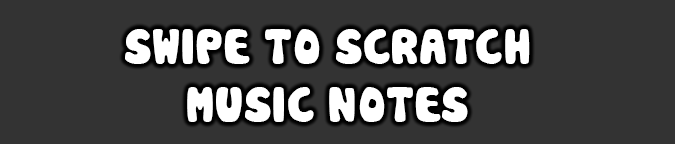
<style>
.page{position:relative;width:675px;height:144px;background:#333333}
.page>*{position:absolute;margin:0}
.t1{font:48px "Cookies";color:#ffffff}
</style>
<div class="page">
<p class="t1" style="left:125px;top:29px;width:405px;height:93px;text-align:center">SWIPE TO SCRATCH <br>MUSIC NOTES</p>
</div>
